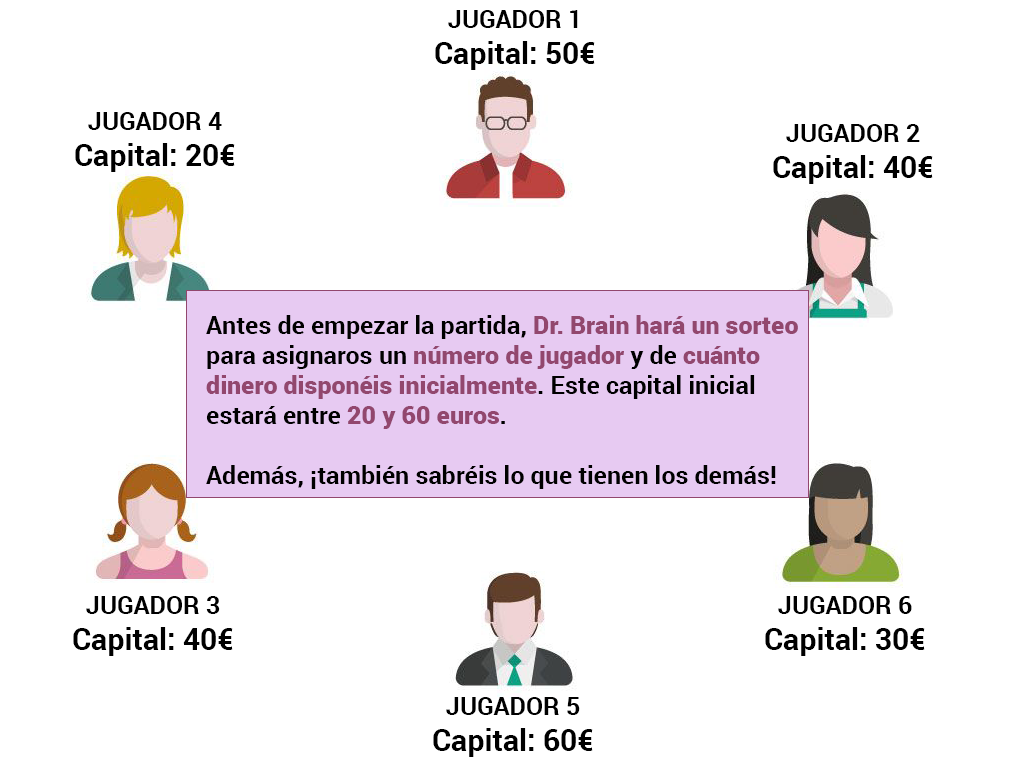
<style>
.page{position:relative;width:1024px;height:768px;background:#ffffff}
.page>*{position:absolute;margin:0}
.t1{font:30px "Roboto-Bold";color:#000000}
.t2{font:25px "Roboto-Bold";color:#000000}
.t3{font:25px "Roboto-Black";color:#92476e}
</style>
<div class="page">
<p class="t1" style="left:435px;top:10px;width:160px;height:60px;text-align:center"><span class="t2">JUGADOR 1<br></span>Capital: 50€</p>
<p class="t1" style="left:75px;top:112px;width:160px;height:60px;text-align:center"><span class="t2">JUGADOR 4<br></span>Capital: 20€</p>
<p class="t1" style="left:773px;top:124px;width:160px;height:60px;text-align:center"><span class="t2">JUGADOR 2<br></span>Capital: 40€</p>
<p class="t2" style="left:206px;top:315px;width:592px;height:174px">Antes de empezar la partida, <span class="t3">Dr. Brain hará un sorteo<br></span>para asignaros un <span class="t3">número de jugador</span> y de <span class="t3">cuánto <br>dinero disponéis inicialmente</span>. Este capital inicial <br>estará entre <span class="t3">20 y 60 euros</span>.<br><br>Además, ¡también sabréis lo que tienen los demás!</p>
<p class="t1" style="left:73px;top:596px;width:160px;height:60px;text-align:center"><span class="t2">JUGADOR 3<br></span>Capital: 40€</p>
<p class="t1" style="left:765px;top:596px;width:160px;height:60px;text-align:center"><span class="t2">JUGADOR 6<br></span>Capital: 30€</p>
<p class="t1" style="left:433px;top:697px;width:160px;height:60px;text-align:center"><span class="t2">JUGADOR 5<br></span>Capital: 60€</p>
</div>
